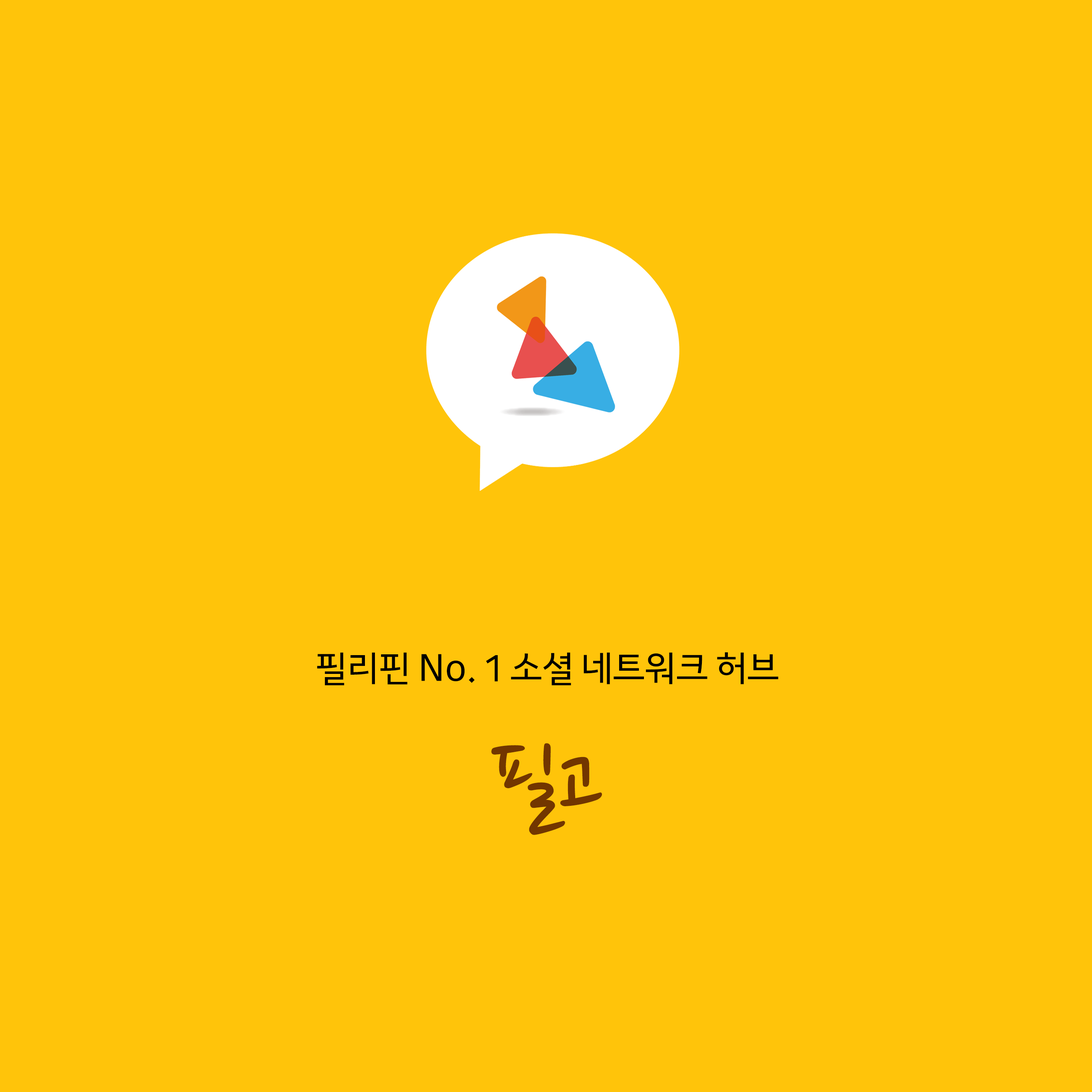
<style>
.page{position:relative;width:1092px;height:1092px;background:#ffc40a}
.page>*{position:absolute;margin:0}
.t1{font:37.8px "KakaoOTFRegular";color:#000000}
.t2{font:106.8px "NanumPen";color:#723600}
</style>
<div class="page">
<p class="t1" style="left:317px;top:652px;width:461px;height:33px">필리핀 No. 1 소셜 네트워크 허브</p>
<p class="t2" style="left:491px;top:743px;width:111px;height:92px">필고</p>
</div>
